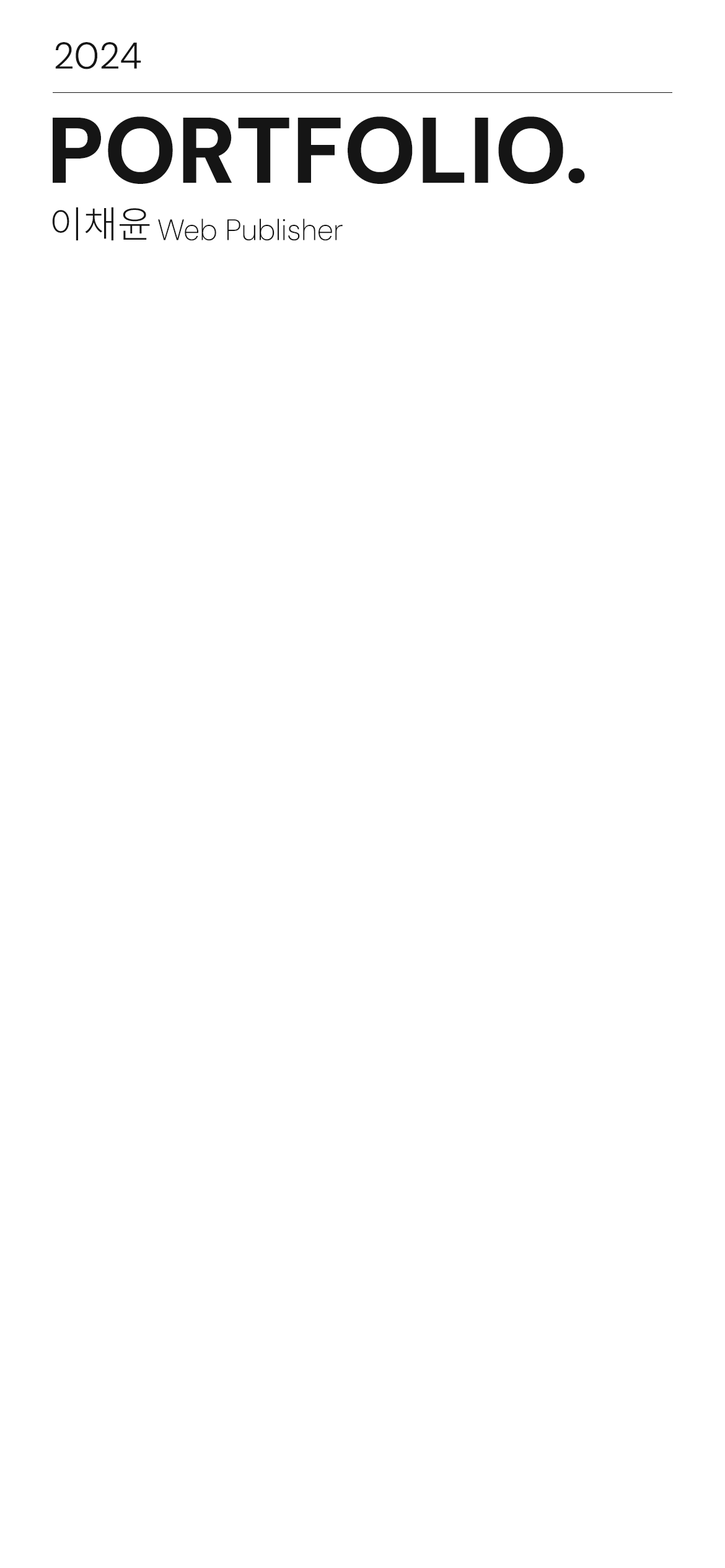
<style>
.page{position:relative;width:725px;height:1568px;background:#ffffff}
.page>*{position:absolute;margin:0}
.t1{font:37.2px "DMSans-Light";color:#151515}
.t2{font:92.9px "DMSans-ExtraBold";color:#151515}
.t3{font:37.2px "NotoSansKR-Light";color:#151515}
.t4{font:29.7px "DMSans-ExtraLight";color:#151515}
</style>
<div class="page">
<p class="t1" style="left:55px;top:42px;width:86px;height:27px">2024</p>
<p class="t2" style="left:53px;top:116px;width:532px;height:68px">PORTFOLIO.</p>
<p class="t3" style="left:52px;top:207px;width:98px;height:34px">이채윤</p>
<p class="t4" style="left:158px;top:219px;width:184px;height:22px">Web Publisher</p>
</div>
